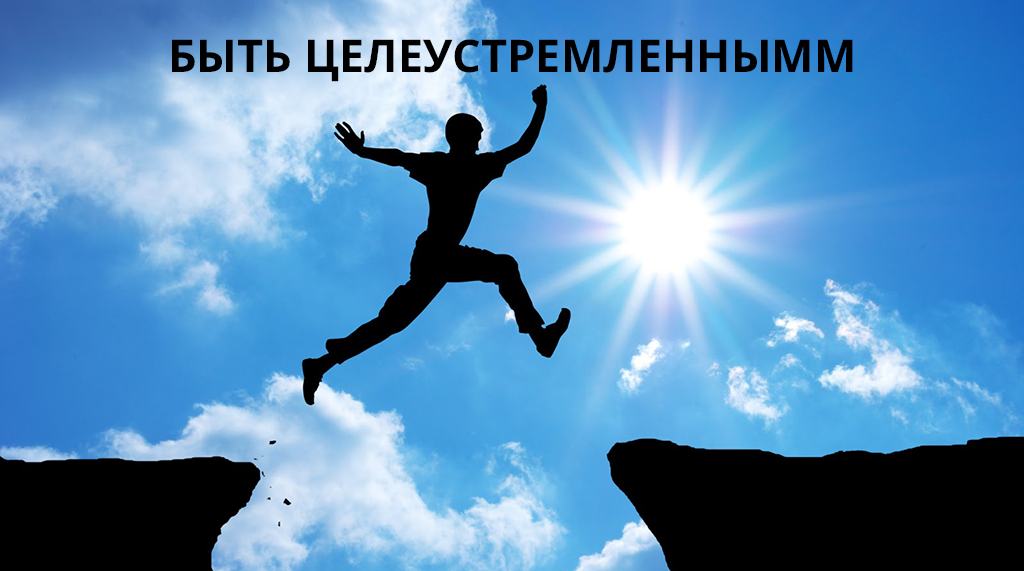
<style>
.page{position:relative;width:1024px;height:571px}
.page>*{position:absolute;margin:0}
.t1{font:45px "OpenSans-Bold";color:#000000;text-transform:uppercase}
</style>
<div class="page">
<p class="t1" style="left:172px;top:39px;width:681px;height:43px">Быть целеустремленнымм</p>
</div>
